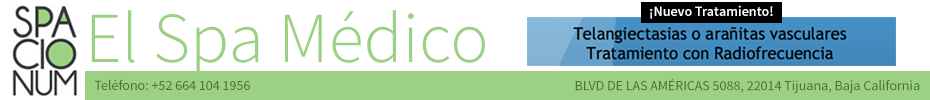
<style>
.page{position:relative;width:930px;height:100px;background:#ffffff}
.page>*{position:absolute;margin:0}
.t1{font:14px "SourceSansPro-Semibold";color:#ffffff}
.t2{font:72px "SourceSansPro-Light";color:#9cd183}
.t3{font:14px "SourceSansPro-Regular";color:#4a7336}
</style>
<div class="page">
<p class="t1" style="left:650px;top:5px;width:123px;height:14px">¡Nuevo Tratamiento!</p>
<p class="t2" style="left:91px;top:10px;width:394px;height:68px">El Spa Médico</p>
<p class="t3" style="left:575px;top:78px;width:345px;height:15px">BLVD DE LAS AMÉRICAS 5088, 22014 Tijuana, Baja California</p>
<p class="t3" style="left:94px;top:79px;width:156px;height:11px">Teléfono: +52 664 104 1956</p>
</div>
